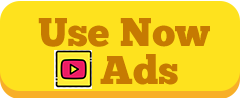
<style>
.page{position:relative;width:240px;height:98px;background:#fee21e}
.page>*{position:absolute;margin:0}
.t1{font:40px "ChunkFive-Regular";color:#c67a02}
</style>
<div class="page">
<p class="t1" style="left:38px;top:18px;width:172px;height:29px">Use Now</p>
<p class="t1" style="left:100px;top:54px;width:78px;height:31px">Ads</p>
</div>
